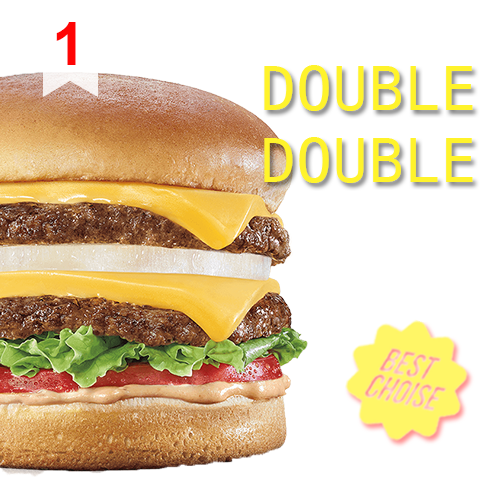
<style>
.page{position:relative;width:500px;height:500px;background:#ffffff}
.page>*{position:absolute;margin:0}
.t1{font:60px "Arial-BoldMT";color:#ff0404}
.t2{font:60px "DejaVuSansMono";color:#fff32b}
</style>
<div class="page">
<p class="t1" style="left:56px;top:22px;width:20px;height:43px">1</p>
<p class="t2" style="left:264px;top:65px;width:209px;height:118px;text-align:center">DOUBLE<br>DOUBLE</p>
</div>
